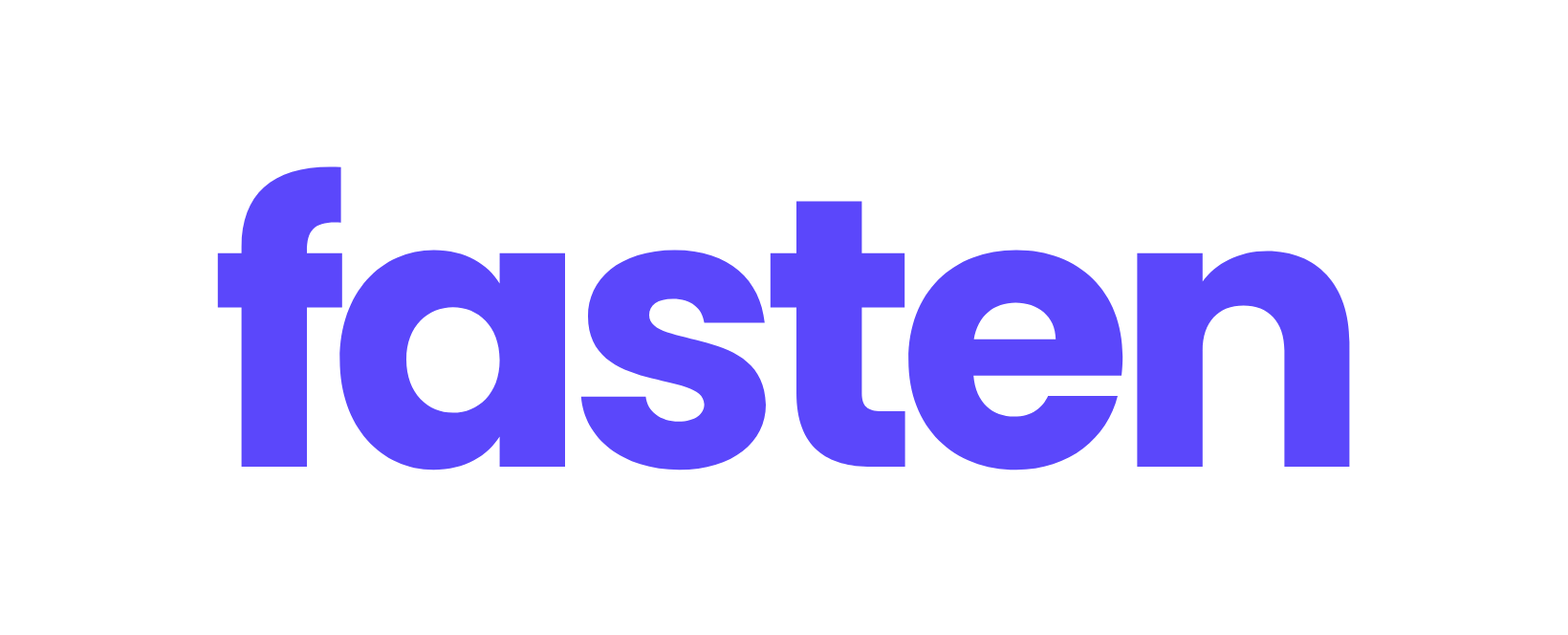
<style>
.page{position:relative;width:1568px;height:635px;background:#ffffff}
.page>*{position:absolute;margin:0}
.t1{font:382.4px "Poppins-Bold";letter-spacing:-0.052em;color:#5b47fb}
</style>
<div class="page">
<p class="t1" style="left:217px;top:163px;width:1133px;height:307px">fasten</p>
</div>
